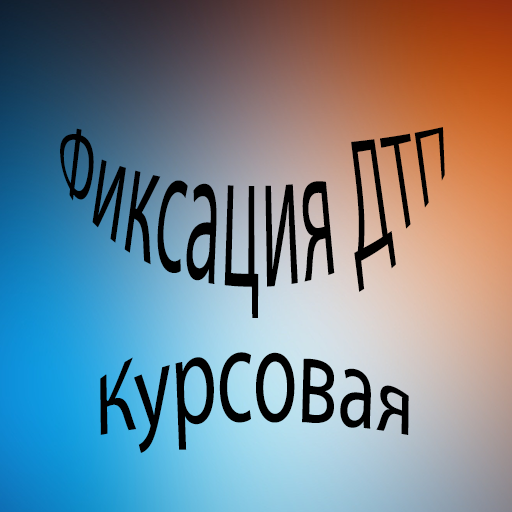
<style>
.page{position:relative;width:512px;height:512px}
.page>*{position:absolute;margin:0}
.t1{font:62.2px "MyriadPro-Regular";color:#000000}
.t2{font:78.8px "MyriadPro-Regular";color:#000000}
</style>
<div class="page">
<p class="t1" style="left:60px;top:127px;width:385px;height:191px">Фиксация ДТП</p>
<p class="t2" style="left:100px;top:352px;width:309px;height:101px">Курсовая</p>
</div>
